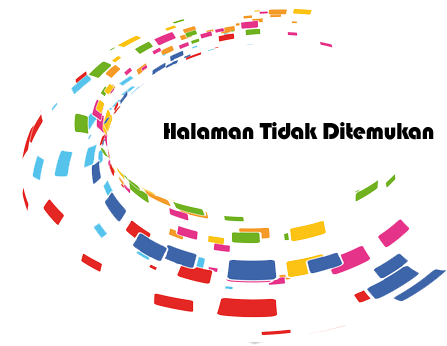
<style>
.page{position:relative;width:447px;height:346px;background:#ffffff}
.page>*{position:absolute;margin:0}
.t1{font:24px "Bauhaus93";letter-spacing:-0.025em;color:#000000}
</style>
<div class="page">
<p class="t1" style="left:164px;top:122px;width:270px;height:18px">Halaman Tidak Ditemukan</p>
</div>
